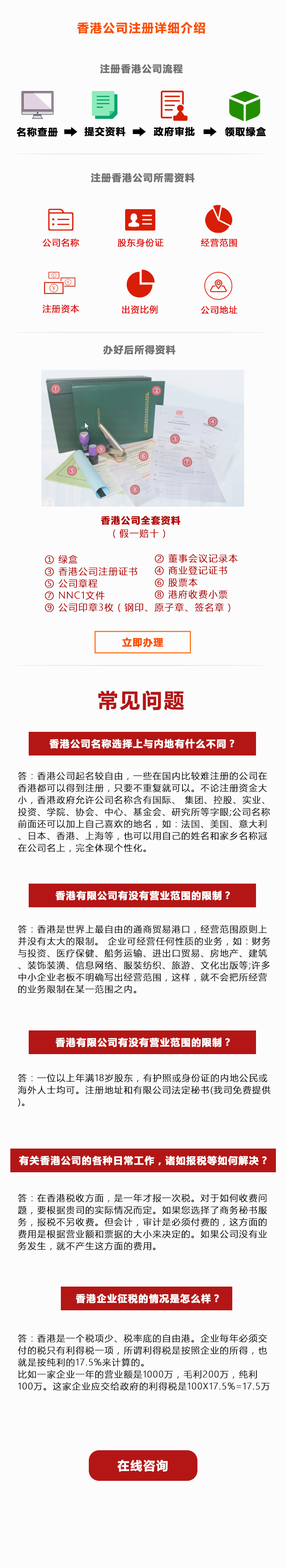
<style>
.page{position:relative;width:287px;height:1568px;background:#fcfcfc}
.page>*{position:absolute;margin:0}
.t1{font:11.9px "MicrosoftYaHeiUI-Bold";letter-spacing:0.065em;color:#fd4f00;text-transform:uppercase;font-weight:bold}
.t2{font:9.6px "MicrosoftYaHeiUI-Bold";letter-spacing:0.065em;color:#727272;text-transform:uppercase;font-weight:bold}
.t3{font:9.6px "MicrosoftYaHeiUI-Bold";letter-spacing:0.065em;color:#000000;text-transform:uppercase;font-weight:bold}
.t4{font:8.5px "MicrosoftYaHeiUI";letter-spacing:0.065em;color:#e10b0b;text-transform:uppercase;font-weight:bold}
.t5{font:9.2px "MicrosoftYaHeiUI-Bold";letter-spacing:0.065em;color:#af0000;text-transform:uppercase;font-weight:bold}
.t6{font:9.2px "MicrosoftYaHeiUILight";letter-spacing:0.065em;color:#af0000;text-transform:uppercase;font-weight:bold}
.t7{font:9.2px/12px "MicrosoftYaHeiUILight";letter-spacing:0.065em;color:#af0000;text-transform:uppercase;font-weight:bold}
.t8{font:9.6px "MicrosoftYaHeiUI-Bold";letter-spacing:0.065em;color:#fd4f00;text-transform:uppercase;font-weight:bold}
.t9{font:20.1px "MicrosoftYaHeiUI-Bold";letter-spacing:0.065em;color:#b41616;text-transform:uppercase;font-weight:bold}
.t10{font:9.6px "MicrosoftYaHeiUI-Bold";letter-spacing:0.065em;color:#ffffff;text-transform:uppercase;font-weight:bold}
.t11{font:8.8px/12px "MicrosoftYaHeiUILight";letter-spacing:0.065em;color:#0f0f0f;text-transform:uppercase;font-weight:bold}
.t12{font:11.9px "MicrosoftYaHeiUI-Bold";letter-spacing:0.065em;color:#ffffff;text-transform:uppercase;font-weight:bold}
</style>
<div class="page">
<p class="t1" style="left:77px;top:22px;width:128px;height:12px">香港公司注册详细介绍</p>
<p class="t2" style="left:100px;top:64px;width:83px;height:10px">注册香港公司流程</p>
<p class="t3" style="left:16px;top:127px;width:42px;height:10px">名称查册</p>
<p class="t3" style="left:84px;top:127px;width:41px;height:9px">提交资料</p>
<p class="t3" style="left:153px;top:127px;width:42px;height:9px">政府审批</p>
<p class="t3" style="left:225px;top:127px;width:41px;height:9px">领取绿盒</p>
<p class="t2" style="left:91px;top:173px;width:104px;height:10px">注册香港公司所需资料</p>
<p class="t4" style="left:42px;top:238px;width:37px;height:9px">公司名称</p>
<p class="t4" style="left:117px;top:238px;width:46px;height:9px">股东身份证</p>
<p class="t4" style="left:201px;top:238px;width:36px;height:9px">经营范围</p>
<p class="t4" style="left:42px;top:304px;width:37px;height:9px">注册资本</p>
<p class="t4" style="left:122px;top:305px;width:36px;height:9px">出资比例</p>
<p class="t4" style="left:201px;top:305px;width:36px;height:9px">公司地址</p>
<p class="t2" style="left:103px;top:345px;width:72px;height:10px">办好后所得资料</p>
<p class="t5" style="left:101px;top:516px;width:79px;height:9px">香港公司全套资料</p>
<p class="t6" style="left:113px;top:529px;width:52px;height:9px">（假一赔十）</p>
<p class="t7" style="left:45px;top:555px;width:185px;height:57px">① 绿盒                    <br>③ 香港公司注册证书   <br>⑤ 公司章程             <br>⑦ NNC1文件          <br>⑨ 公司印章3枚（钢印、原子章、签名章）</p>
<p class="t7" style="left:154px;top:554px;width:83px;height:45px">② 董事会议记录本<br>④ 商业登记证书<br>⑥ 股票本<br>⑧ 港府收费小票</p>
<p class="t8" style="left:122px;top:637px;width:41px;height:10px">立即办理</p>
<p class="t9" style="left:98px;top:691px;width:86px;height:19px">常见问题</p>
<p class="t10" style="left:49px;top:739px;width:185px;height:10px">香港公司名称选择上与内地有什么不同？</p>
<p class="t11" style="left:18px;top:772px;width:252px;height:80px">答：香港公司起名较自由，一些在国内比较难注册的公司在香港都可以得到注册，只要不重复就可以。不论注册资金大小，香港政府允许公司名称含有国际、 集团、控股、实业、投资、学院、协会、中心、基金会、研究所等字眼;公司名称前面还可以加上自己喜欢的地名，如：法国、美国、意大利、日本、香港、上海等，也可以用自己的姓名和家乡名称冠在公司名上，完全体现个性化。</p>
<p class="t10" style="left:55px;top:890px;width:175px;height:10px">香港有限公司有没有营业范围的限制？</p>
<p class="t11" style="left:18px;top:925px;width:252px;height:69px">答：香港是世界上最自由的通商贸易港口，经营范围原则上并没有太大的限制。 企业可经营任何性质的业务，如：财务与投资、医疗保健、船务运输、进出口贸易、房地产、建筑、装饰装潢、信息网络、服装纺织、旅游、文化出版等;许多中小企业老板不明确写出经营范围，这样，就不会把所经营的业务限制在某一范围之内。</p>
<p class="t10" style="left:55px;top:1037px;width:175px;height:10px">香港有限公司有没有营业范围的限制？</p>
<p class="t11" style="left:18px;top:1074px;width:252px;height:33px">答：一位以上年满18岁股东，有护照或身份证的内地公民或海外人士均可。注册地址和有限公司法定秘书(我司免费提供)。</p>
<p class="t10" style="left:19px;top:1155px;width:247px;height:10px">有关香港公司的各种日常工作，诸如报税等如何解决？</p>
<p class="t11" style="left:18px;top:1194px;width:249px;height:56px">答：在香港税收方面，是一年才报一次税。对于如何收费问题，要根据贵司的实际情况而定。如果您选择了商务秘书服务，报税不另收费。但会计，审计是必须付费的，这方面的费用是根据营业额和票据的大小来决定的。如果公司没有业务发生，就不产生这方面的费用。</p>
<p class="t10" style="left:76px;top:1293px;width:143px;height:10px">香港企业征税的情况是怎么样？</p>
<p class="t11" style="left:18px;top:1334px;width:252px;height:57px">答：香港是一个税项少、税率底的自由港。企业每年必须交付的税只有利得税一项，所谓利得税是按照企业的所得，也就是按纯利的17.5%来计算的。<br>比如一家企业一年的营业额是1000万，毛利200万，纯利100万。这家企业应交给政府的利得税是100X17.5%=17.5万。如果企业不盈利，企业就不需要交税。</p>
<p class="t12" style="left:117px;top:1460px;width:50px;height:12px">在线咨询</p>
</div>
